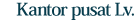
<style>
.page{position:relative;width:134px;height:20px;background:#ffffff}
.page>*{position:absolute;margin:0}
.t1{font:18px "HeiseiMinStd-W7";letter-spacing:-0.04em;color:#073c4d}
</style>
<div class="page">
<p class="t1" style="left:16px;top:2px;width:118px;height:18px">Kantor pusat Lv.</p>
</div>
